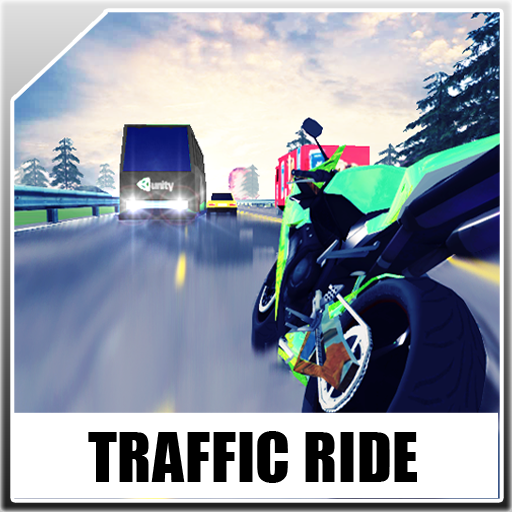
<style>
.page{position:relative;width:512px;height:512px}
.page>*{position:absolute;margin:0}
.t1{font:63px "Impact";letter-spacing:0.012em;color:#000000}
</style>
<div class="page">
<p class="t1" style="left:88px;top:431px;width:329px;height:52px">TRAFFIC RIDE</p>
</div>
